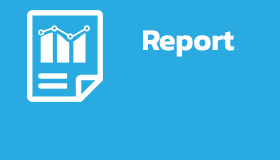
<style>
.page{position:relative;width:280px;height:160px;background:#29abe2}
.page>*{position:absolute;margin:0}
.t1{font:30px "Kanit-SemiBold";color:#ffffff}
</style>
<div class="page">
<p class="t1" style="left:143px;top:30px;width:91px;height:27px">Report</p>
</div>
